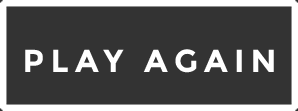
<style>
.page{position:relative;width:298px;height:111px;background:#333333}
.page>*{position:absolute;margin:0}
.t1{font:31.8px "Montserrat-Bold";letter-spacing:0.2em;color:#ffffff;text-transform:uppercase}
</style>
<div class="page">
<p class="t1" style="left:25px;top:49px;width:249px;height:24px">Play Again</p>
</div>
